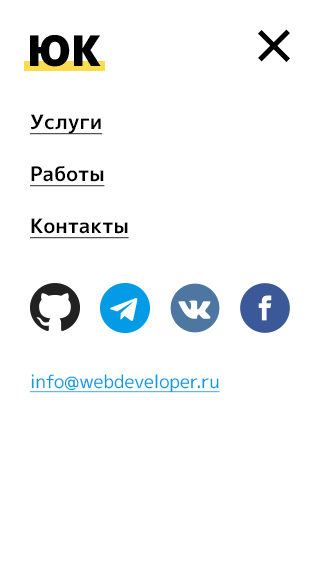
<style>
.page{position:relative;width:320px;height:568px;background:#ffffff}
.page>*{position:absolute;margin:0}
.t1{font:42px "Mplus1p-Black";color:#000000}
.t2{font:20px/22px "Mplus1p-Bold";color:#000000;text-decoration:underline}
.t3{font:18px "Mplus1p-Regular";color:#039be5;text-decoration:underline}
</style>
<div class="page">
<p class="t1" style="left:30px;top:35px;width:71px;height:32px">ЮК</p>
<p class="t2" style="left:30px;top:114px;width:99px;height:125px">Услуги<br>Работы<br>Контакты</p>
<p class="t3" style="left:30px;top:374px;width:190px;height:19px">info@webdeveloper.ru</p>
</div>
